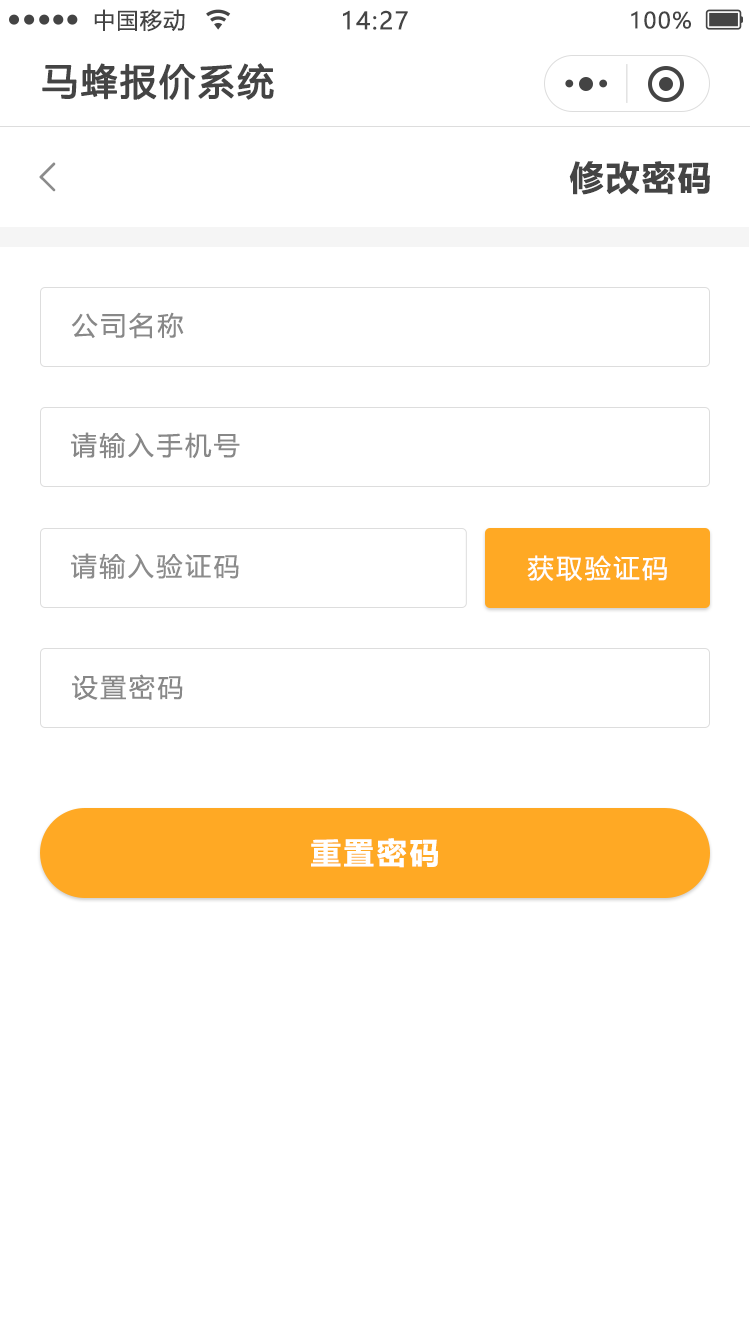
<style>
.page{position:relative;width:750px;height:1334px;background:#ffffff}
.page>*{position:absolute;margin:0}
.t1{font:22px "MicrosoftYaHeiUI";letter-spacing:0.06em;color:#444444}
.t2{font:24px "MicrosoftYaHeiUI";letter-spacing:0.06em;color:#444444}
.t3{font:36px "MicrosoftYaHeiUI";letter-spacing:0.06em;color:#444444;font-weight:bold}
.t4{font:34px "MicrosoftYaHeiUI-Bold";letter-spacing:0.06em;color:#444444}
.t5{font:40px "FangSong";letter-spacing:0.1em;color:#8c8c8c;font-weight:bold}
.t6{font:26px "MicrosoftYaHeiUI";letter-spacing:0.1em;color:#888888}
.t7{font:26px "MicrosoftYaHeiUI";letter-spacing:0.1em;color:#8c8c8c}
.t8{font:26px "MicrosoftYaHeiUI";letter-spacing:0.1em;color:#ffffff}
.t9{font:30px "MicrosoftYaHeiUI-Bold";letter-spacing:0.1em;color:#ffffff}
</style>
<div class="page">
<p class="t1" style="left:94px;top:9px;width:91px;height:23px">中国移动</p>
<p class="t2" style="left:343px;top:10px;width:65px;height:20px">14:27</p>
<p class="t1" style="left:631px;top:11px;width:60px;height:18px">100%</p>
<p class="t3" style="left:42px;top:63px;width:232px;height:37px">马蜂报价系统</p>
<p class="t4" style="left:569px;top:161px;width:141px;height:34px">修改密码</p>
<p class="t5" style="left:39px;top:162px;width:17px;height:30px">&lt;</p>
<p class="t6" style="left:71px;top:312px;width:113px;height:27px">公司名称</p>
<p class="t6" style="left:71px;top:432px;width:169px;height:27px">请输入手机号</p>
<p class="t7" style="left:71px;top:553px;width:168px;height:26px">请输入验证码</p>
<p class="t8" style="left:527px;top:555px;width:140px;height:26px">获取验证码</p>
<p class="t6" style="left:72px;top:674px;width:111px;height:26px">设置密码</p>
<p class="t9" style="left:311px;top:838px;width:127px;height:30px">重置密码</p>
</div>
